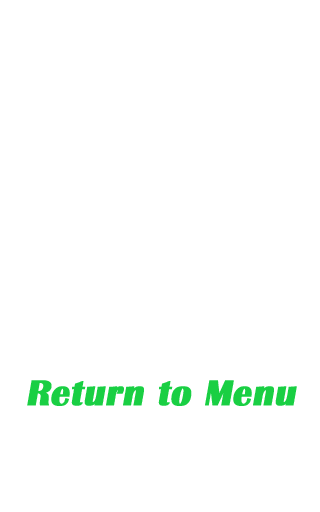
<style>
.page{position:relative;width:320px;height:512px;background:#ffffff}
.page>*{position:absolute;margin:0}
.t1{font:37.4px "BritannicBold";color:#19cf43;font-weight:bold;font-style:italic}
</style>
<div class="page">
<p class="t1" style="left:27px;top:380px;width:270px;height:26px">Return to Menu</p>
</div>
